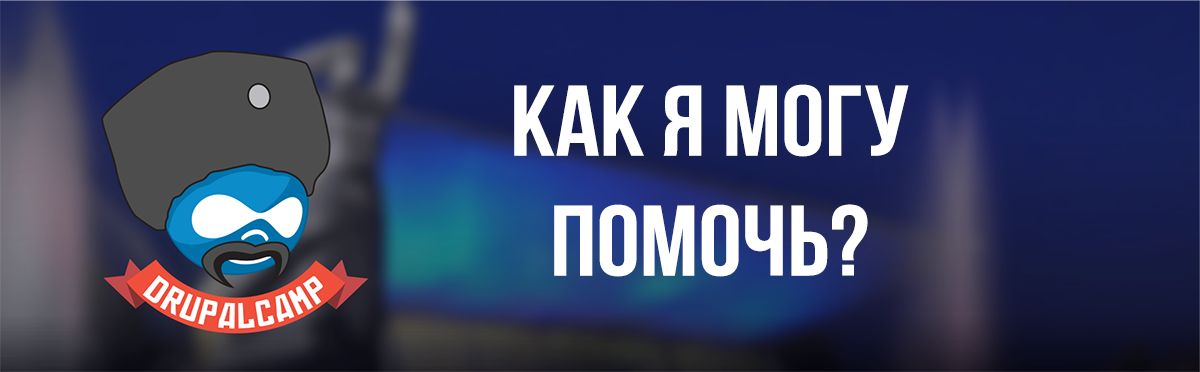
<style>
.page{position:relative;width:1200px;height:372px}
.page>*{position:absolute;margin:0}
.t1{font:100px "BebasNeueBold";color:#ffffff;scale:1.09 1}
</style>
<div class="page">
<p class="t1" style="left:514px;top:84px;width:395px;height:193px;text-align:center">как я могу <br>помочь?</p>
</div>
